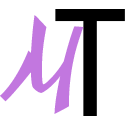
<style>
.page{position:relative;width:125px;height:125px;background:#ffffff}
.page>*{position:absolute;margin:0}
.t1{font:100px "Yesteryear-Regular";color:#c277df}
.t2{font:150px "RobotoCondensed-Regular";color:#000000}
</style>
<div class="page">
<p class="t1" style="left:0px;top:15px;width:84px;height:99px">M</p>
<p class="t2" style="left:55px;top:9px;width:70px;height:107px">T</p>
</div>
